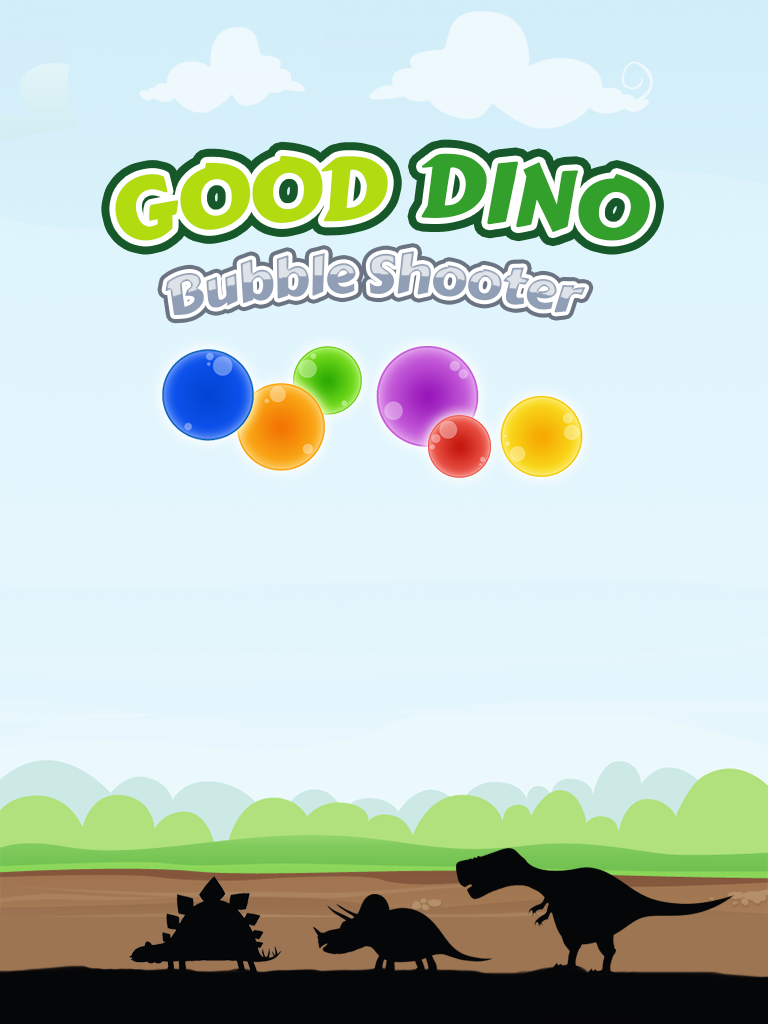
<style>
.page{position:relative;width:768px;height:1024px}
.page>*{position:absolute;margin:0}
.t1{font:87px "CarterOne";letter-spacing:-0.02em;color:#b3dc10}
.t2{font:87px "CarterOne";letter-spacing:-0.02em;color:#33a02c}
.t3{font:54px "CarterOne";letter-spacing:-0.02em}
</style>
<div class="page">
<p class="t1" style="left:115px;top:155px;width:273px;height:86px">GOOD</p>
<p class="t2" style="left:421px;top:153px;width:229px;height:88px">DINO</p>
<p class="t3" style="left:165px;top:251px;width:421px;height:65px">Bubble Shooter</p>
</div>
